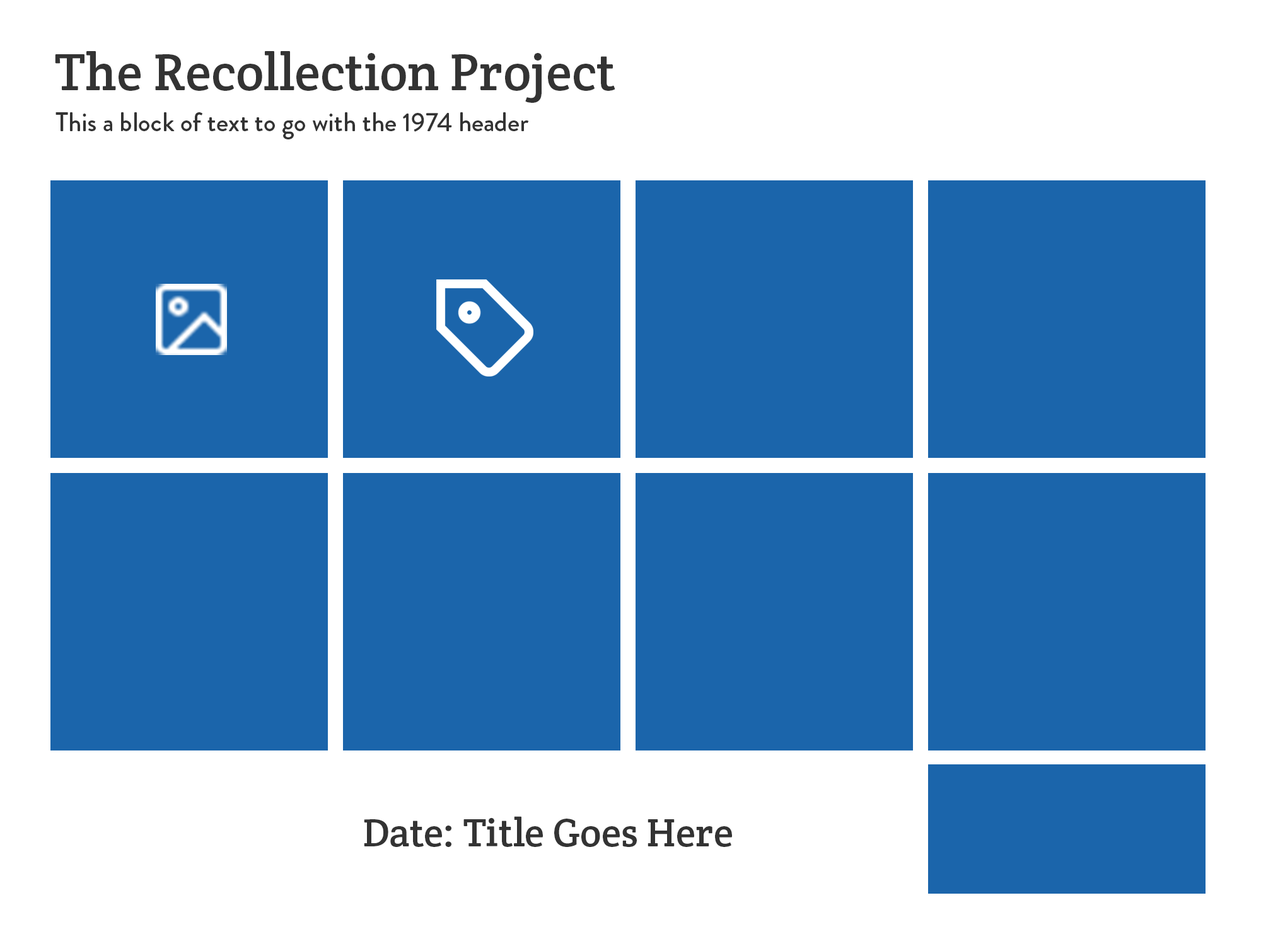
<style>
.page{position:relative;width:1261px;height:946px;background:#1b65ab}
.page>*{position:absolute;margin:0}
.t1{font:52.5px "CreteRound-Regular";color:#333333}
.t2{font:26.3px "BrandonGrotesque-Medium";color:#333333}
.t3{font:40.1px "CreteRound-Regular";color:#333333}
</style>
<div class="page">
<p class="t1" style="left:55px;top:51px;width:560px;height:52px">The Recollection Project</p>
<p class="t2" style="left:55px;top:112px;width:474px;height:27px">This a block of text to go with the 1974 header</p>
<p class="t3" style="left:364px;top:816px;width:368px;height:31px">Date: Title Goes Here</p>
</div>
